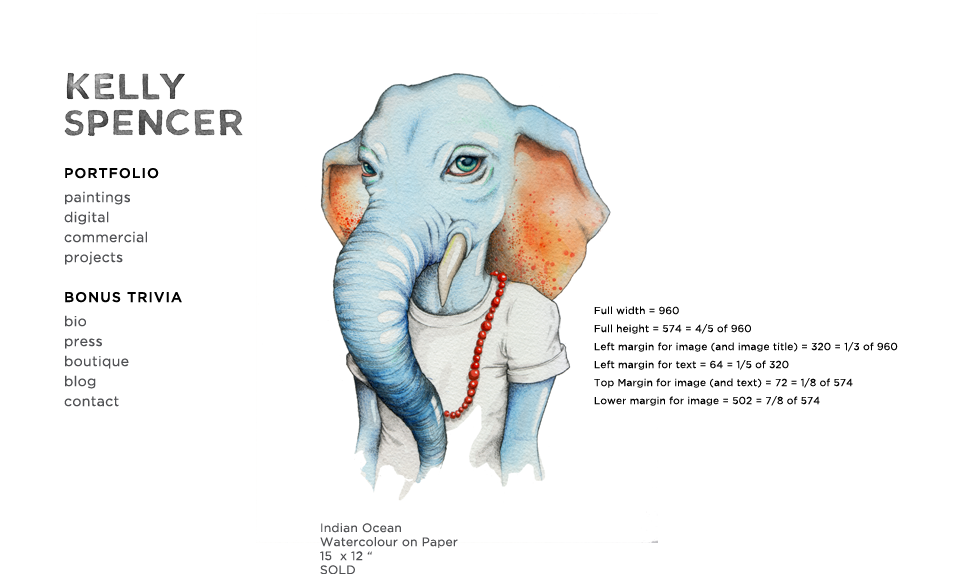
<style>
.page{position:relative;width:960px;height:574px;background:#ffffff}
.page>*{position:absolute;margin:0}
.t1{font:14px/20px "Gotham";letter-spacing:0.025em;color:#505154}
.t2{font:14px/20px "GothamMedium";letter-spacing:0.075em;color:#000000}
.t3{font:14px/24px "Gotham";letter-spacing:0.025em;color:#505154}
.t4{font:10px/18px "Gotham";letter-spacing:0.025em;color:#000000}
.t5{font:12px/14px "Gotham";letter-spacing:0.025em;color:#505154}
</style>
<div class="page">
<p class="t1" style="left:64px;top:168px;width:118px;height:239px"><span class="t2">PORTFOLIO<br></span><span class="t3">paintings<br></span>digital<br>commercial<br>projects<br><br><span class="t2">BONUS TRIVIA<br></span><span class="t3">bio</span><br>press<br>boutique<br>blog<br>contact</p>
<p class="t4" style="left:594px;top:306px;width:304px;height:100px">Full width = 960<br>Full height = 574 = 4/5 of 960<br>Left margin for image (and image title) = 320 = 1/3 of 960<br>Left margin for text = 64 = 1/5 of 320<br>Top Margin for image (and text) = 72 = 1/8 of 574<br>Lower margin for image = 502 = 7/8 of 574</p>
<p class="t5" style="left:320px;top:523px;width:138px;height:52px">Indian Ocean<br>Watercolour on Paper<br>15  x 12 “<br>SOLD</p>
</div>
